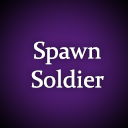
<style>
.page{position:relative;width:128px;height:128px}
.page>*{position:absolute;margin:0}
.t1{font:24px "Constantia";color:#ffffff}
</style>
<div class="page">
<p class="t1" style="left:31px;top:41px;width:73px;height:47px;text-align:center">Spawn<br>Soldier</p>
</div>
